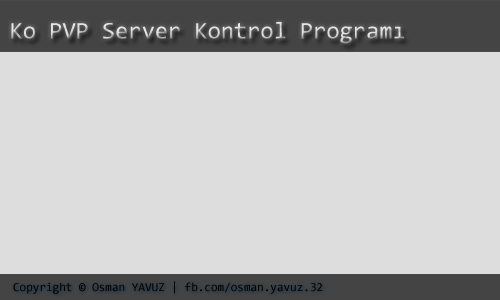
<style>
.page{position:relative;width:500px;height:300px;background:#dddddd}
.page>*{position:absolute;margin:0}
.t1{font:24px "Consolas"}
.t2{font:12px "Consolas";color:#000000}
</style>
<div class="page">
<p class="t1" style="left:11px;top:22px;width:393px;height:22px">Ko PVP Server Kontrol Programı</p>
<p class="t2" style="left:13px;top:281px;width:310px;height:13px">Copyright © Osman YAVUZ | fb.com/osman.yavuz.32</p>
</div>
